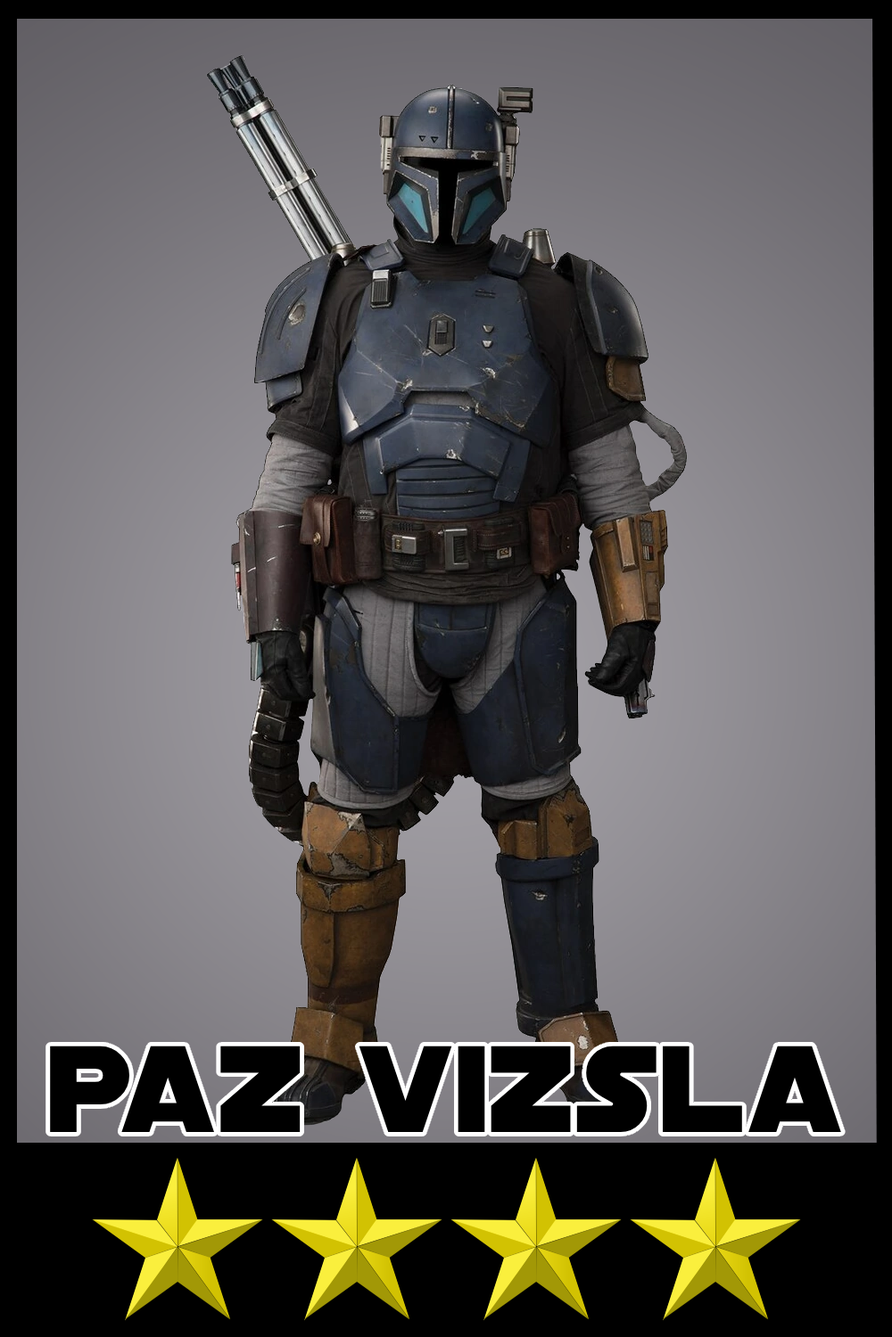
<style>
.page{position:relative;width:892px;height:1337px}
.page>*{position:absolute;margin:0}
.t1{font:131.9px "DistantGalaxy";color:#000000}
</style>
<div class="page">
<p class="t1" style="left:50px;top:1046px;width:791px;height:86px">paz vizsla</p>
</div>
